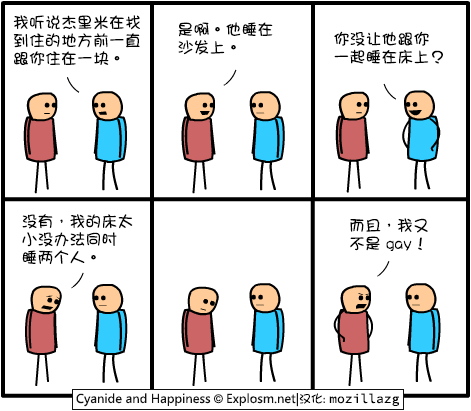
<style>
.page{position:relative;width:471px;height:411px;background:#ffffff}
.page>*{position:absolute;margin:0}
.t1{font:16px/18px "DFGirl";color:#000000}
</style>
<div class="page">
<p class="t1" style="left:13px;top:15px;width:127px;height:51px">我听说杰里米在找<br>到住的地方前一直<br>跟你住在一块。</p>
<p class="t1" style="left:178px;top:22px;width:95px;height:33px">是啊。他睡在<br>沙发上。</p>
<p class="t1" style="left:334px;top:31px;width:109px;height:33px">你没让他跟你<br>一起睡在床上？</p>
<p class="t1" style="left:22px;top:214px;width:111px;height:51px">没有，我的床太<br>小没办法同时<br>睡两个人。</p>
<p class="t1" style="left:350px;top:218px;width:78px;height:33px">而且，我又<br>不是 gay！</p>
</div>
